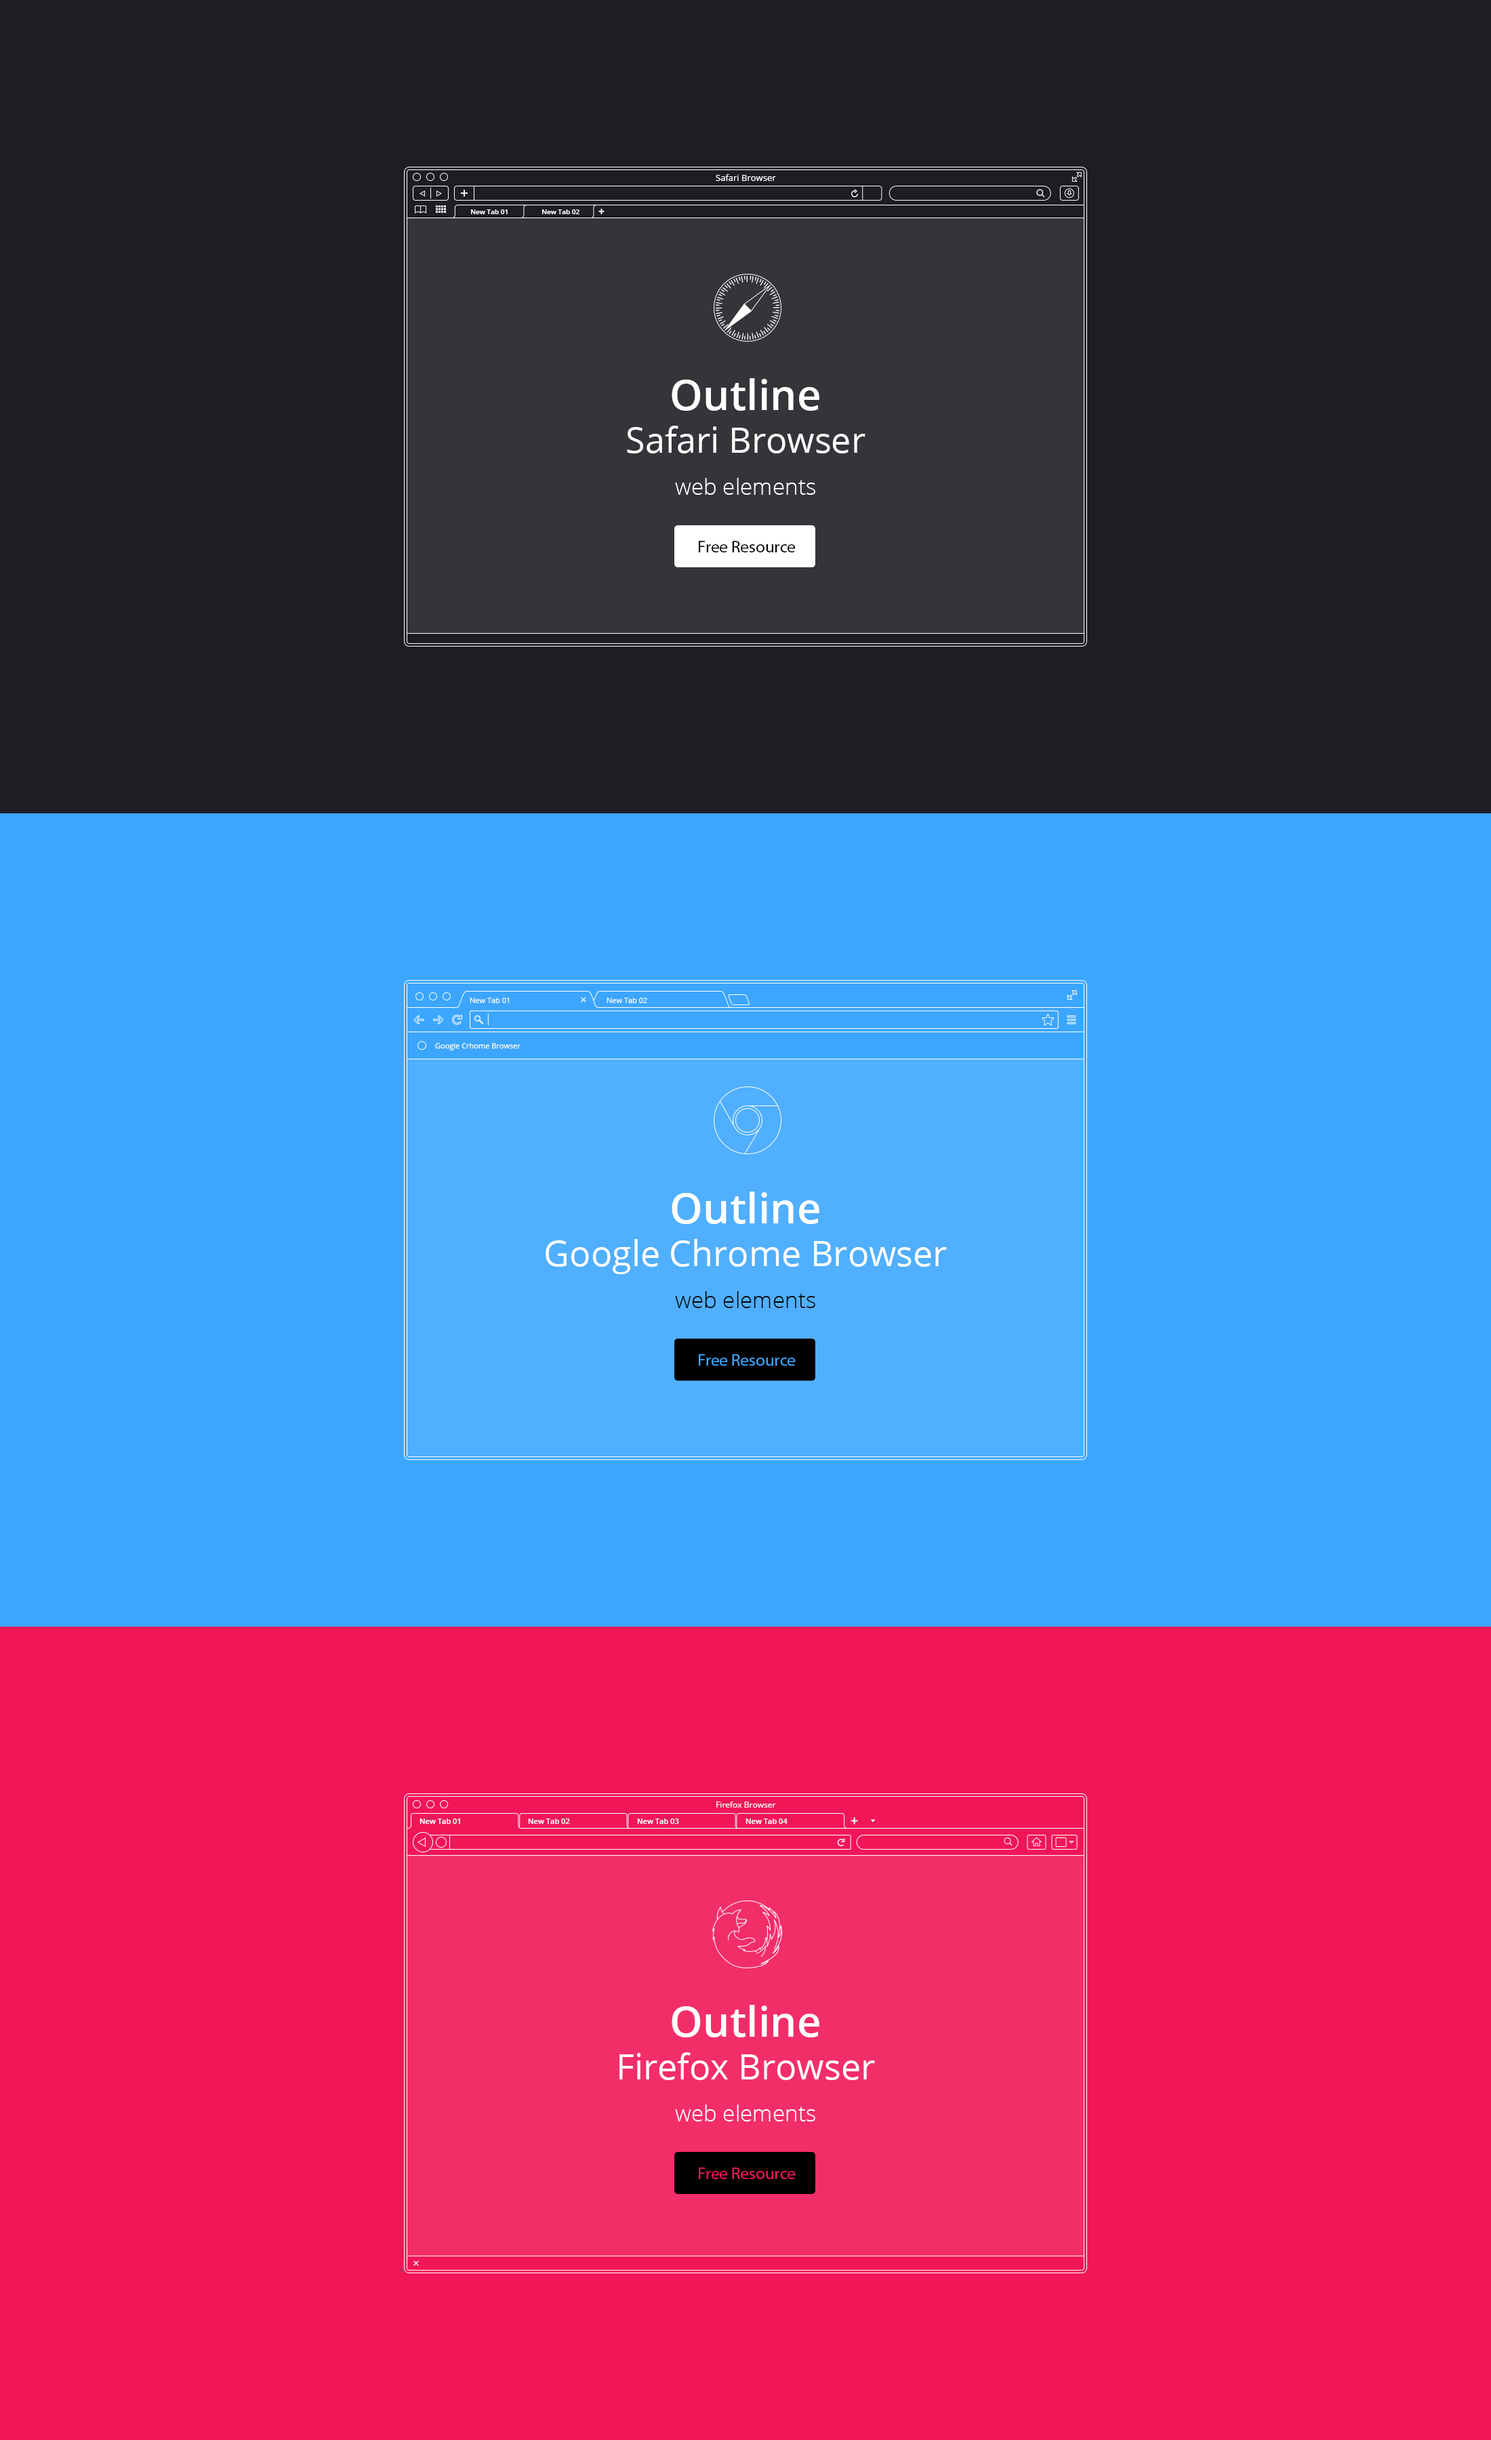
<style>
.page{position:relative;width:1491px;height:2440px;background:#3ca6fe}
.page>*{position:absolute;margin:0}
.t1{font:8.8px "OpenSans";color:#ffffff}
.t2{font:6.8px "OpenSans-Semibold";color:#ffffff}
.t3{font:35.2px/42.3px "OpenSans";color:#ffffff}
.t4{font:42.3px "OpenSans-Semibold";color:#ffffff}
.t5{font:22.5px/42.3px "OpenSans-Light";color:#ffffff}
.t6{font:16.9px "MyriadPro-Regular";color:#000000}
.t7{font:7.5px "OpenSans";color:#ffffff}
.t8{font:22.5px/42.3px "OpenSans-Light";color:#000000}
.t9{font:16.9px "MyriadPro-Regular";color:#3ca6fe}
.t10{font:8.1px "OpenSans";color:#ffffff}
.t11{font:7.5px "OpenSans-Semibold";color:#ffffff}
.t12{font:16.9px "MyriadPro-Regular";color:#f11658}
</style>
<div class="page">
<p class="t1" style="left:716px;top:174px;width:60px;height:7px">Safari Browser</p>
<p class="t2" style="left:471px;top:209px;width:37px;height:5px">New Tab 01</p>
<p class="t2" style="left:542px;top:209px;width:37px;height:5px">New Tab 02</p>
<p class="t3" style="left:627px;top:378px;width:239px;height:117px;text-align:center"><span class="t4">Outline <br></span>Safari Browser<br><span class="t5">web elements</span></p>
<p class="t6" style="left:699px;top:541px;width:97px;height:11px">Free Resource</p>
<p class="t7" style="left:470px;top:998px;width:39px;height:5px">New Tab 01</p>
<p class="t7" style="left:607px;top:998px;width:40px;height:5px">New Tab 02</p>
<p class="t7" style="left:435px;top:1043px;width:86px;height:8px">Google Crhome Browser</p>
<p class="t3" style="left:546px;top:1192px;width:401px;height:116px;text-align:center"><span class="t4">Outline <br></span>Google Chrome Browser<br><span class="t8">web elements</span></p>
<p class="t9" style="left:699px;top:1354px;width:97px;height:12px">Free Resource</p>
<p class="t10" style="left:716px;top:1801px;width:60px;height:7px">Firefox Browser</p>
<p class="t11" style="left:420px;top:1818px;width:40px;height:6px">New Tab 01</p>
<p class="t11" style="left:528px;top:1818px;width:42px;height:6px">New Tab 02</p>
<p class="t11" style="left:637px;top:1818px;width:42px;height:6px">New Tab 03</p>
<p class="t11" style="left:746px;top:1818px;width:42px;height:6px">New Tab 04</p>
<p class="t3" style="left:619px;top:2005px;width:256px;height:116px;text-align:center"><span class="t4">Outline <br></span>Firefox Browser<br><span class="t5">web elements</span></p>
<p class="t12" style="left:699px;top:2167px;width:97px;height:12px">Free Resource</p>
</div>
